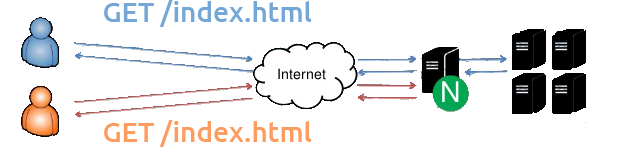
<style>
.page{position:relative;width:638px;height:154px;background:#ffffff}
.page>*{position:absolute;margin:0}
.t1{font:28px "Ubuntu-Medium";color:#74a7d6}
.t2{font:28px "Ubuntu-Medium";color:#fc9c5f}
</style>
<div class="page">
<p class="t1" style="left:104px;top:0px;width:208px;height:27px">GET /index.html</p>
<p class="t2" style="left:104px;top:120px;width:208px;height:27px">GET /index.html</p>
</div>
